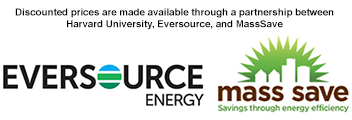
<style>
.page{position:relative;width:352px;height:120px;background:#ffffff}
.page>*{position:absolute;margin:0}
.t1{font:9.9px "Arial-BoldMT";letter-spacing:-0.005em;color:#000000}
</style>
<div class="page">
<p class="t1" style="left:15px;top:8px;width:319px;height:22px;text-align:center">Discounted prices are made available through a partnership between<br>Harvard University, Eversource, and MassSave</p>
</div>
